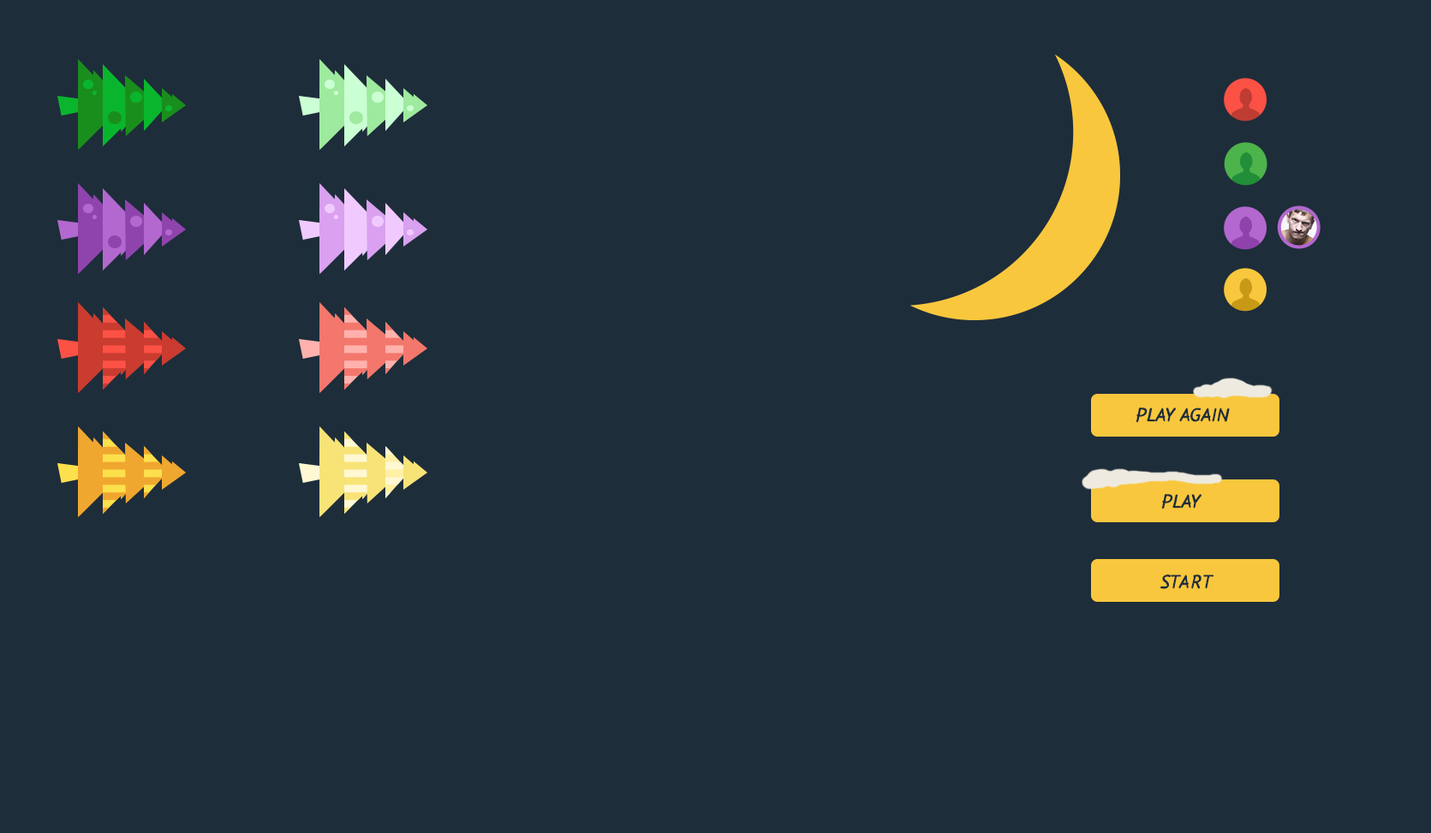
<style>
.page{position:relative;width:1431px;height:833px;background:#1e2d3a}
.page>*{position:absolute;margin:0}
.t1{font:18.8px "Flow-Bold";color:#1e2d3a;text-transform:uppercase}
</style>
<div class="page">
<p class="t1" style="left:1136px;top:407px;width:94px;height:16px">Play again</p>
<p class="t1" style="left:1161px;top:493px;width:41px;height:17px">PLAY</p>
<p class="t1" style="left:1160px;top:575px;width:54px;height:14px">START</p>
</div>
